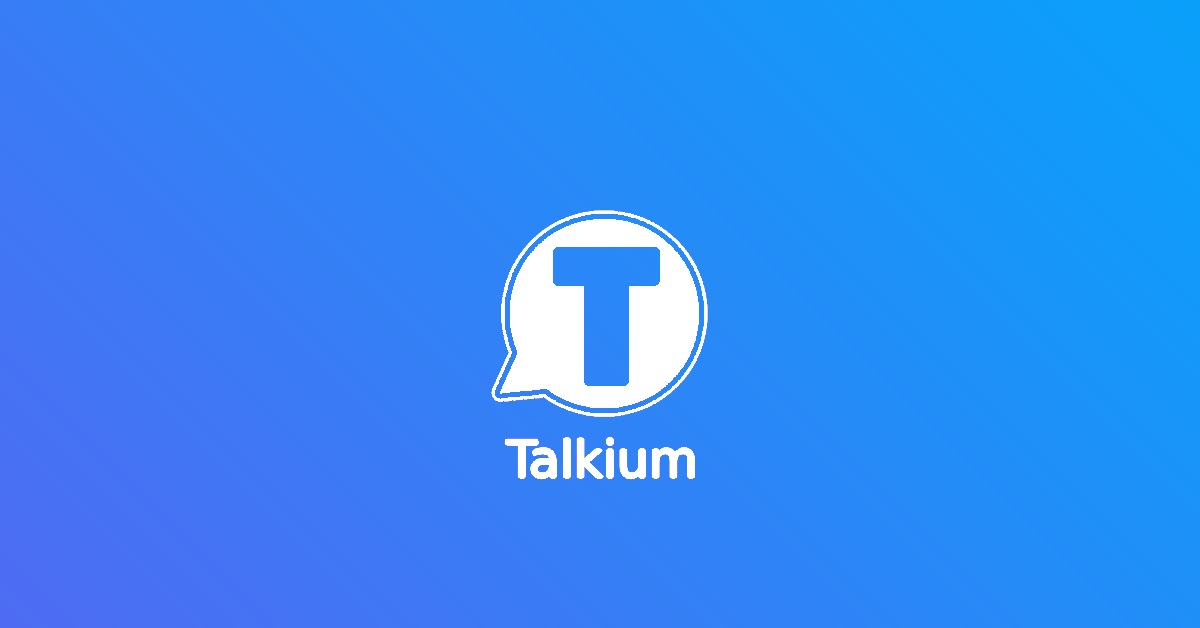
<style>
.page{position:relative;width:1200px;height:628px}
.page>*{position:absolute;margin:0}
.t1{font:50.4px "DejaVuSans";color:#ffffff}
</style>
<div class="page">
<p class="t1" style="left:506px;top:438px;width:188px;height:40px">Talkium</p>
</div>
